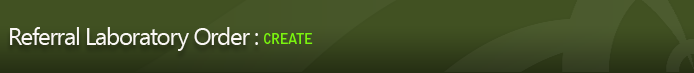
<style>
.page{position:relative;width:694px;height:73px;background:#415122}
.page>*{position:absolute;margin:0}
.t1{font:24px "SegoeUI";letter-spacing:-0.05em;color:#faf7f5}
.t2{font:14px "BellGothicStd-Bold";letter-spacing:-0.05em;color:#7af40e}
</style>
<div class="page">
<p class="t1" style="left:10px;top:27px;width:248px;height:24px">Referral Laboratory Order :</p>
<p class="t2" style="left:264px;top:33px;width:49px;height:11px">CREATE</p>
</div>
